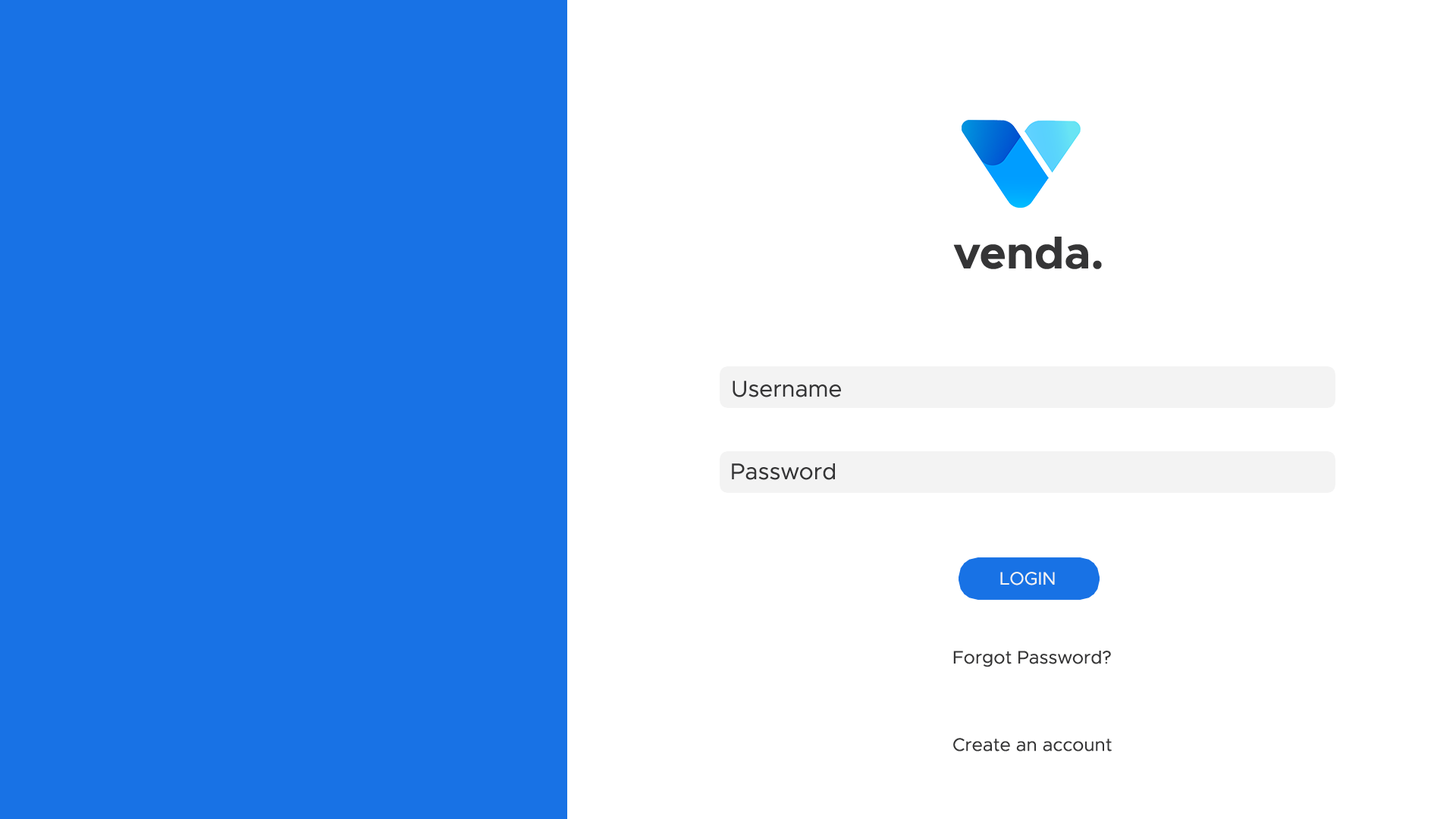
<style>
.page{position:relative;width:1456px;height:819px;background:#ffffff}
.page>*{position:absolute;margin:0}
.t1{font:22.7px "Metropolis-Regular";color:#353536}
.t2{font:18.2px "Metropolis-Regular";color:#f3f3f3}
.t3{font:18.2px "Metropolis-Regular";color:#353536}
</style>
<div class="page">
<p class="t1" style="left:733px;top:381px;width:108px;height:16px">Username</p>
<p class="t1" style="left:732px;top:463px;width:103px;height:17px">Password</p>
<p class="t2" style="left:1000px;top:572px;width:55px;height:13px">LOGIN</p>
<p class="t3" style="left:953px;top:651px;width:159px;height:100px">Forgot Password?<br><br><br><br>Create an account</p>
</div>
